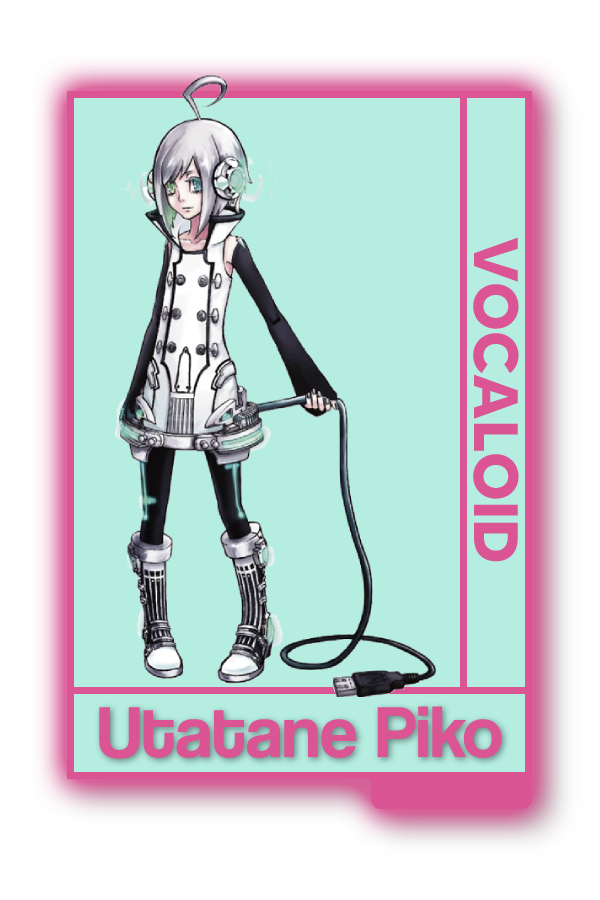
<style>
.page{position:relative;width:600px;height:900px;background:#b5ede1}
.page>*{position:absolute;margin:0}
.t1{font:62.5px "MADETOMMY-Bold";color:#db5493}
.t2{font:75px "CoolveticaRg-Regular";color:#db5493}
</style>
<div class="page">
<p class="t1" style="left:473px;top:237px;width:46px;height:325px;rotate:90deg">VOCALOID</p>
<p class="t2" style="left:99px;top:706px;width:403px;height:53px">Utatane Piko</p>
</div>
